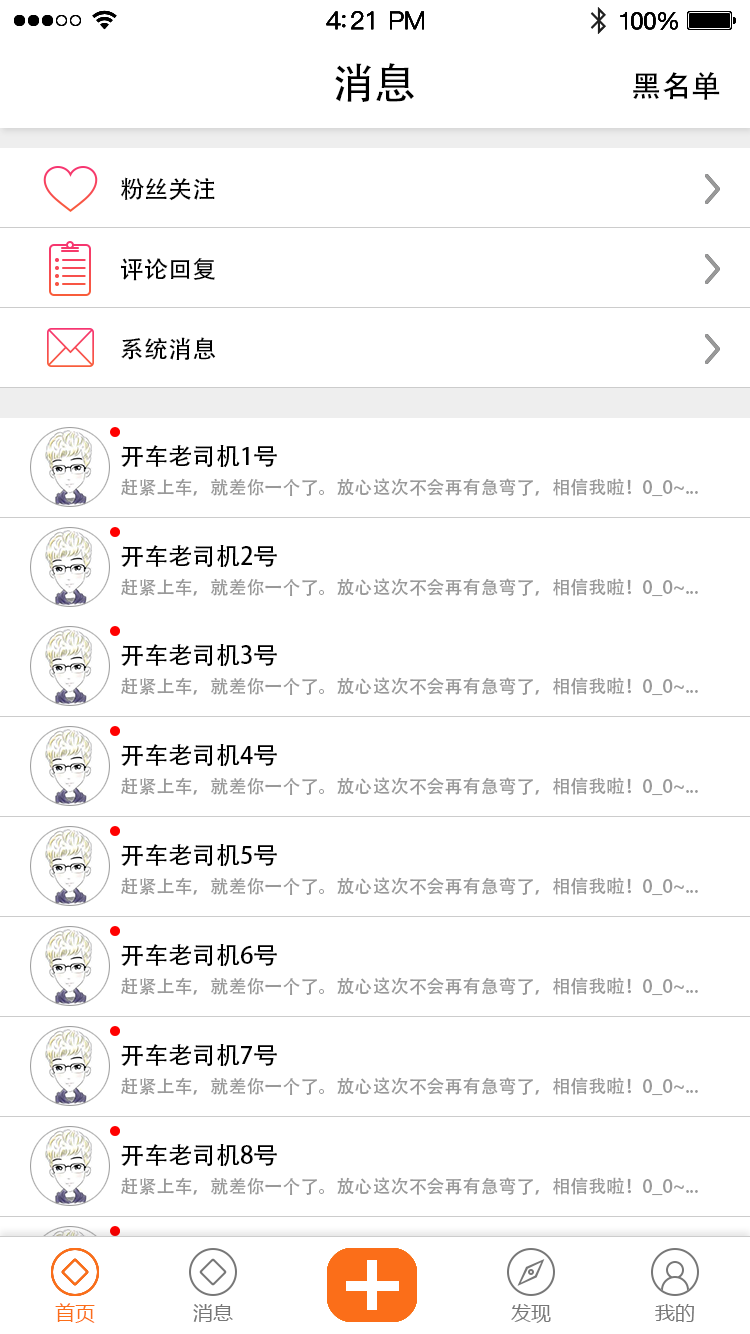
<style>
.page{position:relative;width:750px;height:1334px;background:#ffffff}
.page>*{position:absolute;margin:0}
.t1{font:42px "AdobeHeitiStd-Regular";color:#000000}
.t2{font:30px "AdobeHeitiStd-Regular";color:#000000}
.t3{font:24px "AdobeHeitiStd-Regular";color:#000000}
.t4{font:18px "AdobeHeitiStd-Regular";color:#999999}
.t5{font:20px "MicrosoftYaHei";color:#fb6e19}
.t6{font:20px "MicrosoftYaHei";color:#777777}
</style>
<div class="page">
<p class="t1" style="left:335px;top:63px;width:79px;height:39px">消息</p>
<p class="t2" style="left:633px;top:72px;width:87px;height:28px">黑名单</p>
<p class="t3" style="left:121px;top:177px;width:94px;height:24px">粉丝关注</p>
<p class="t3" style="left:121px;top:258px;width:94px;height:23px">评论回复</p>
<p class="t3" style="left:121px;top:337px;width:95px;height:23px">系统消息</p>
<p class="t3" style="left:121px;top:445px;width:156px;height:23px">开车老司机1号</p>
<p class="t4" style="left:121px;top:478px;width:577px;height:19px">赶紧上车，就差你一个了。放心这次不会再有急弯了，相信我啦！0_0~...</p>
<p class="t3" style="left:121px;top:545px;width:156px;height:23px">开车老司机2号</p>
<p class="t4" style="left:121px;top:578px;width:577px;height:19px">赶紧上车，就差你一个了。放心这次不会再有急弯了，相信我啦！0_0~...</p>
<p class="t3" style="left:121px;top:644px;width:156px;height:23px">开车老司机3号</p>
<p class="t4" style="left:121px;top:677px;width:577px;height:19px">赶紧上车，就差你一个了。放心这次不会再有急弯了，相信我啦！0_0~...</p>
<p class="t3" style="left:121px;top:744px;width:156px;height:23px">开车老司机4号</p>
<p class="t4" style="left:121px;top:777px;width:577px;height:19px">赶紧上车，就差你一个了。放心这次不会再有急弯了，相信我啦！0_0~...</p>
<p class="t3" style="left:121px;top:844px;width:156px;height:23px">开车老司机5号</p>
<p class="t4" style="left:121px;top:877px;width:577px;height:19px">赶紧上车，就差你一个了。放心这次不会再有急弯了，相信我啦！0_0~...</p>
<p class="t3" style="left:121px;top:944px;width:156px;height:23px">开车老司机6号</p>
<p class="t4" style="left:121px;top:977px;width:577px;height:19px">赶紧上车，就差你一个了。放心这次不会再有急弯了，相信我啦！0_0~...</p>
<p class="t3" style="left:121px;top:1044px;width:156px;height:23px">开车老司机7号</p>
<p class="t4" style="left:121px;top:1077px;width:577px;height:19px">赶紧上车，就差你一个了。放心这次不会再有急弯了，相信我啦！0_0~...</p>
<p class="t3" style="left:121px;top:1144px;width:156px;height:23px">开车老司机8号</p>
<p class="t4" style="left:121px;top:1177px;width:577px;height:19px">赶紧上车，就差你一个了。放心这次不会再有急弯了，相信我啦！0_0~...</p>
<p class="t5" style="left:55px;top:1303px;width:40px;height:20px">首页</p>
<p class="t6" style="left:193px;top:1304px;width:40px;height:18px">消息</p>
<p class="t6" style="left:511px;top:1304px;width:40px;height:19px">发现</p>
<p class="t6" style="left:655px;top:1304px;width:39px;height:18px">我的</p>
</div>
